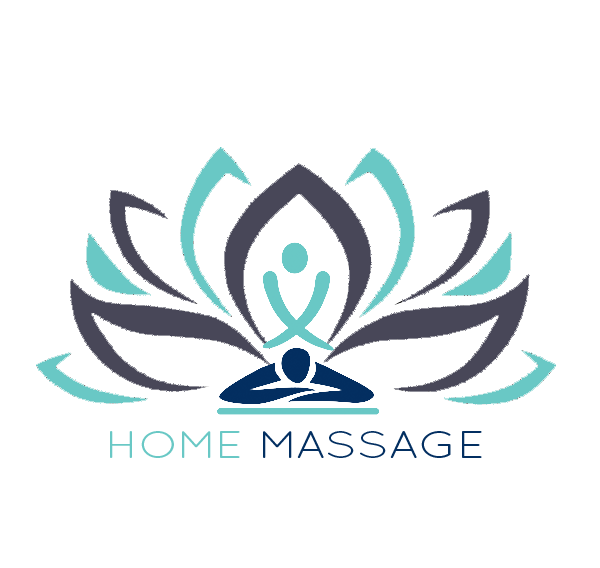
<style>
.page{position:relative;width:600px;height:568px;background:#ffffff}
.page>*{position:absolute;margin:0}
.t1{font:38.4px "Quicksand-Regular";color:#032f61;text-transform:uppercase;scale:1.25 1}
.t2{font:38.4px "Quicksand-Regular";color:#69c8c5;text-transform:uppercase;scale:1.25 1}
</style>
<div class="page">
<p class="t1" style="left:110px;top:431px;width:372px;height:27px"><span class="t2">Home</span> Massage</p>
</div>
